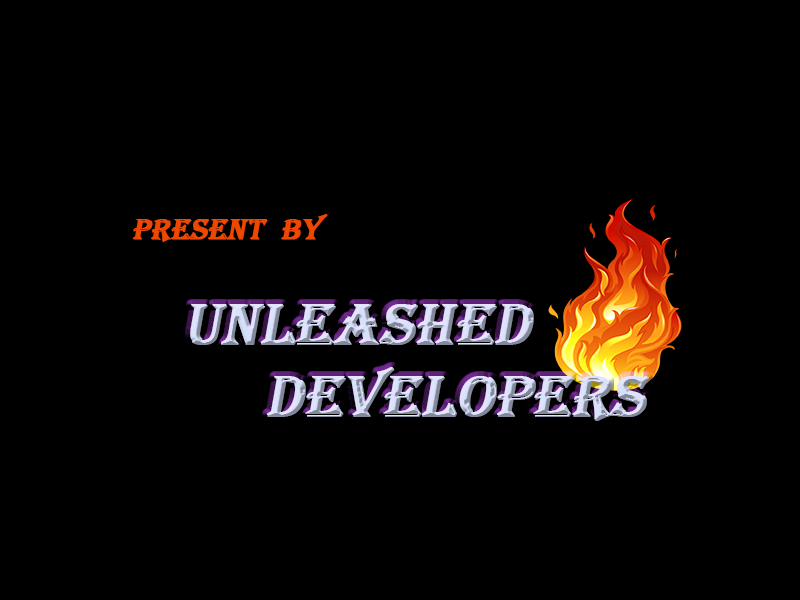
<style>
.page{position:relative;width:800px;height:600px;background:#000001}
.page>*{position:absolute;margin:0}
.t1{font:30px "Algerian";color:#ee4700;font-weight:bold;font-style:italic}
.t2{font:60px "Algerian";color:#00000c;font-weight:bold;font-style:italic}
.t3{font:60px "Algerian";font-weight:bold;font-style:italic}
.t4{font:60px "ArialRoundedMTBold";font-weight:bold;font-style:italic}
</style>
<div class="page">
<p class="t1" style="left:132px;top:214px;width:196px;height:28px"><span class="t2">     </span>present  by</p>
<p class="t3" style="left:190px;top:304px;width:459px;height:117px;text-align:center"><span class="t4"><br></span>UNLEASHED <br>          DEVELOPERS</p>
</div>
